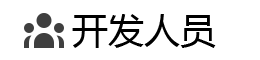
<style>
.page{position:relative;width:260px;height:60px;background:#ffffff}
.page>*{position:absolute;margin:0}
.t1{font:36px "MicrosoftYaHei";color:#000000}
</style>
<div class="page">
<p class="t1" style="left:72px;top:14px;width:144px;height:34px">开发人员</p>
</div>
